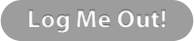
<style>
.page{position:relative;width:194px;height:41px;background:#9d9d9d}
.page>*{position:absolute;margin:0}
.t1{font:26px "MyriadPro-Bold"}
</style>
<div class="page">
<p class="t1" style="left:28px;top:9px;width:138px;height:24px">Log Me Out!</p>
</div>
